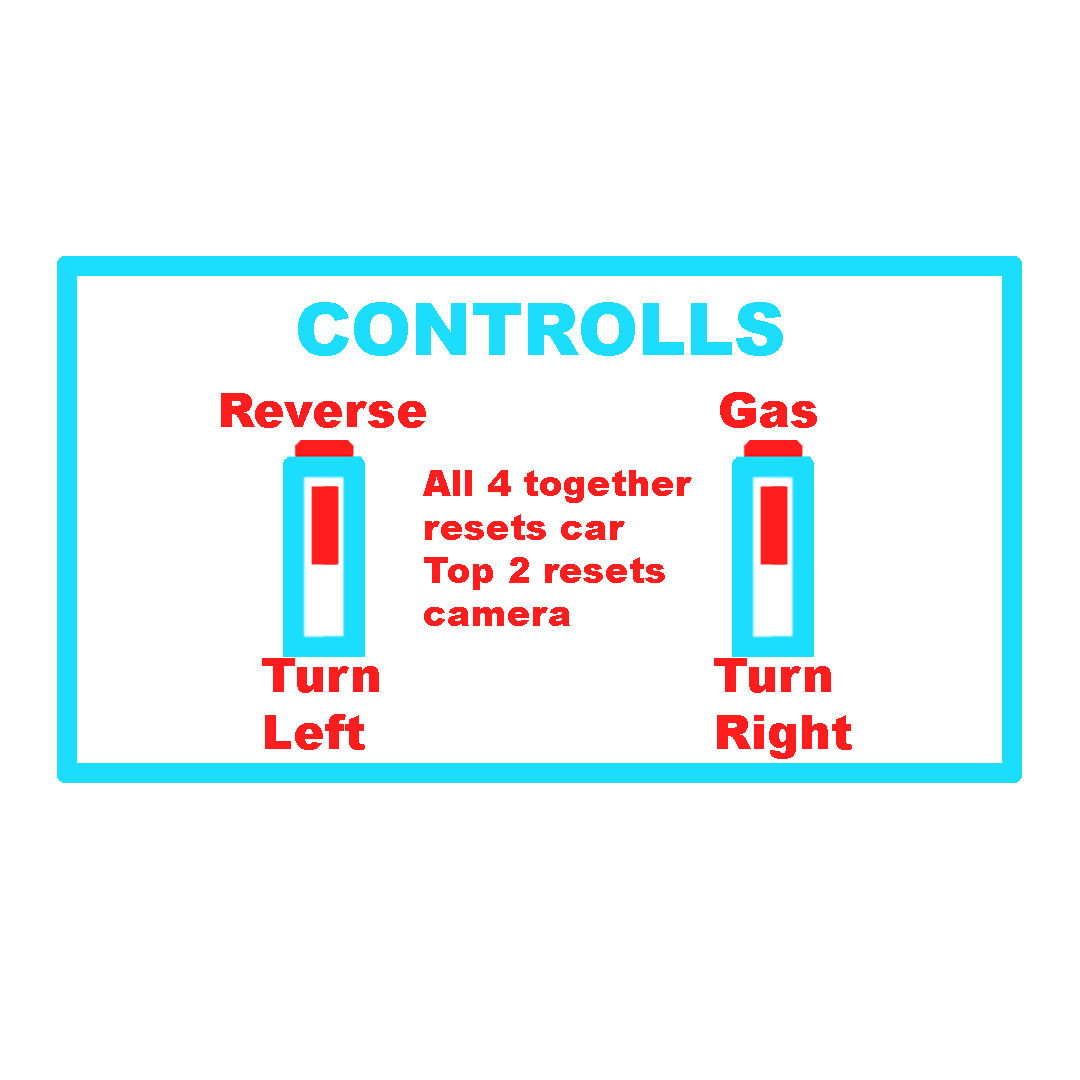
<style>
.page{position:relative;width:1080px;height:1080px;background:#ffffff}
.page>*{position:absolute;margin:0}
.t1{font:72px "Arial-Black";color:#1dddff}
.t2{font:48px "Arial-Black";color:#ff1d1d}
.t3{font:36px "Arial-Black";color:#ff1d1d}
</style>
<div class="page">
<p class="t1" style="left:298px;top:302px;width:485px;height:54px">CONTROLLS</p>
<p class="t2" style="left:221px;top:393px;width:205px;height:35px">Reverse</p>
<p class="t2" style="left:720px;top:392px;width:97px;height:36px">Gas</p>
<p class="t3" style="left:423px;top:470px;width:269px;height:156px">All 4 together resets car<br>Top 2 resets camera</p>
<p class="t2" style="left:262px;top:658px;width:117px;height:92px">Turn Left</p>
<p class="t2" style="left:714px;top:658px;width:138px;height:101px">Turn<br>Right</p>
</div>
